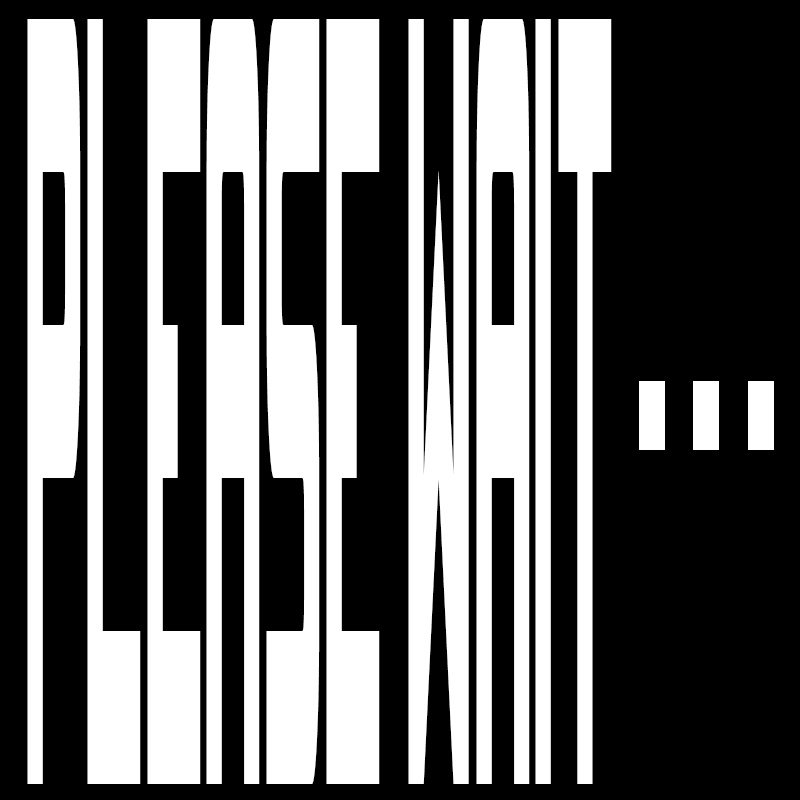
<style>
.page{position:relative;width:800px;height:800px;background:#000000}
.page>*{position:absolute;margin:0}
.t1{font:1225.2px "SpaceMarineNominal";color:#ffffff;scale:0.05 1}
.t2{font:1061.3px "MyriadPro-Regular";color:#ffffff;scale:0.1 1}
</style>
<div class="page">
<p class="t1" style="left:27px;top:19px;width:585px;height:765px">please wait</p>
<p class="t2" style="left:639px;top:381px;width:135px;height:69px">- - -</p>
</div>
